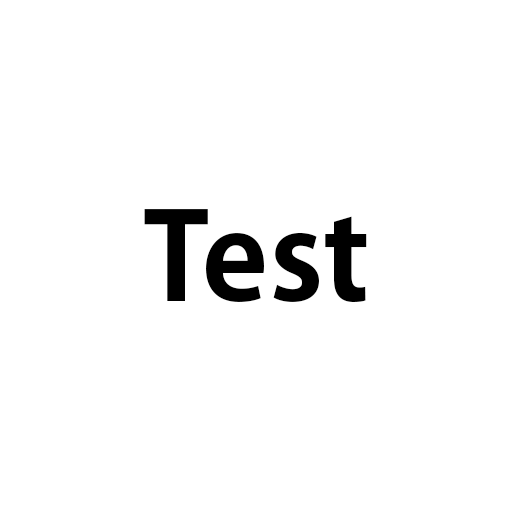
<style>
.page{position:relative;width:512px;height:512px;background:#ffffff}
.page>*{position:absolute;margin:0}
.t1{font:120px "KozGoPro-Bold";color:#000000}
</style>
<div class="page">
<p class="t1" style="left:144px;top:209px;width:223px;height:93px">Test</p>
</div>
